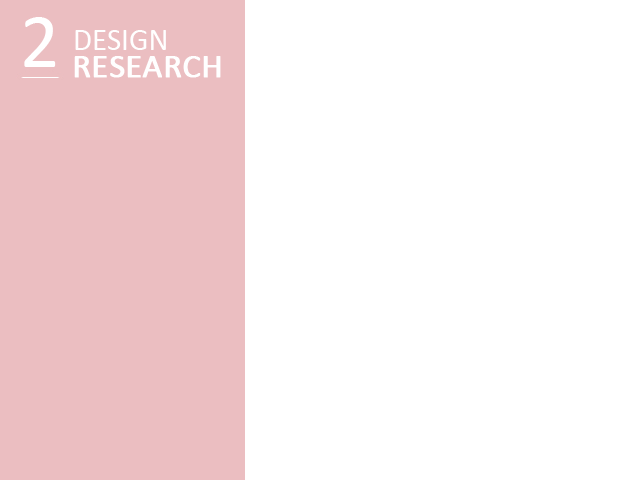
<style>
.page{position:relative;width:640px;height:480px;background:#ffffff}
.page>*{position:absolute;margin:0}
.t1{font:77.7px "Calibri";color:#ffffff}
.t2{font:30.9px "Calibri";color:#ffffff}
.t3{font:33.8px "Calibri";color:#ffffff;font-weight:bold}
</style>
<div class="page">
<p class="t1" style="left:24px;top:17px;width:32px;height:50px">2</p>
<p class="t2" style="left:75px;top:30px;width:91px;height:20px">DESIGN</p>
<p class="t3" style="left:74px;top:56px;width:147px;height:22px">RESEARCH</p>
</div>
